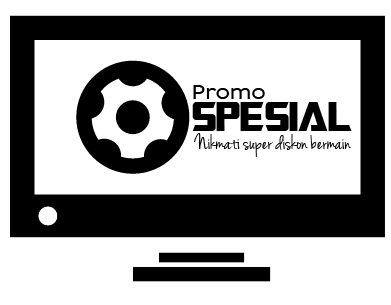
<style>
.page{position:relative;width:391px;height:305px;background:#ffffff}
.page>*{position:absolute;margin:0}
.t1{font:22.3px "IdealistSans";color:#000000}
.t2{font:46.3px "Transformers";color:#000000}
.t3{font:22.3px "JennaSue";color:#000000}
</style>
<div class="page">
<p class="t1" style="left:193px;top:85px;width:72px;height:14px">Promo</p>
<p class="t2" style="left:192px;top:102px;width:160px;height:29px">Spesial</p>
<p class="t3" style="left:194px;top:133px;width:157px;height:24px">Nikmati super diskon bermain</p>
</div>
